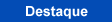
<style>
.page{position:relative;width:112px;height:22px;background:#034cb5}
.page>*{position:absolute;margin:0}
.t1{font:14px "Arial-BoldMT";color:#ffffff}
</style>
<div class="page">
<p class="t1" style="left:26px;top:6px;width:62px;height:13px">Destaque</p>
</div>
